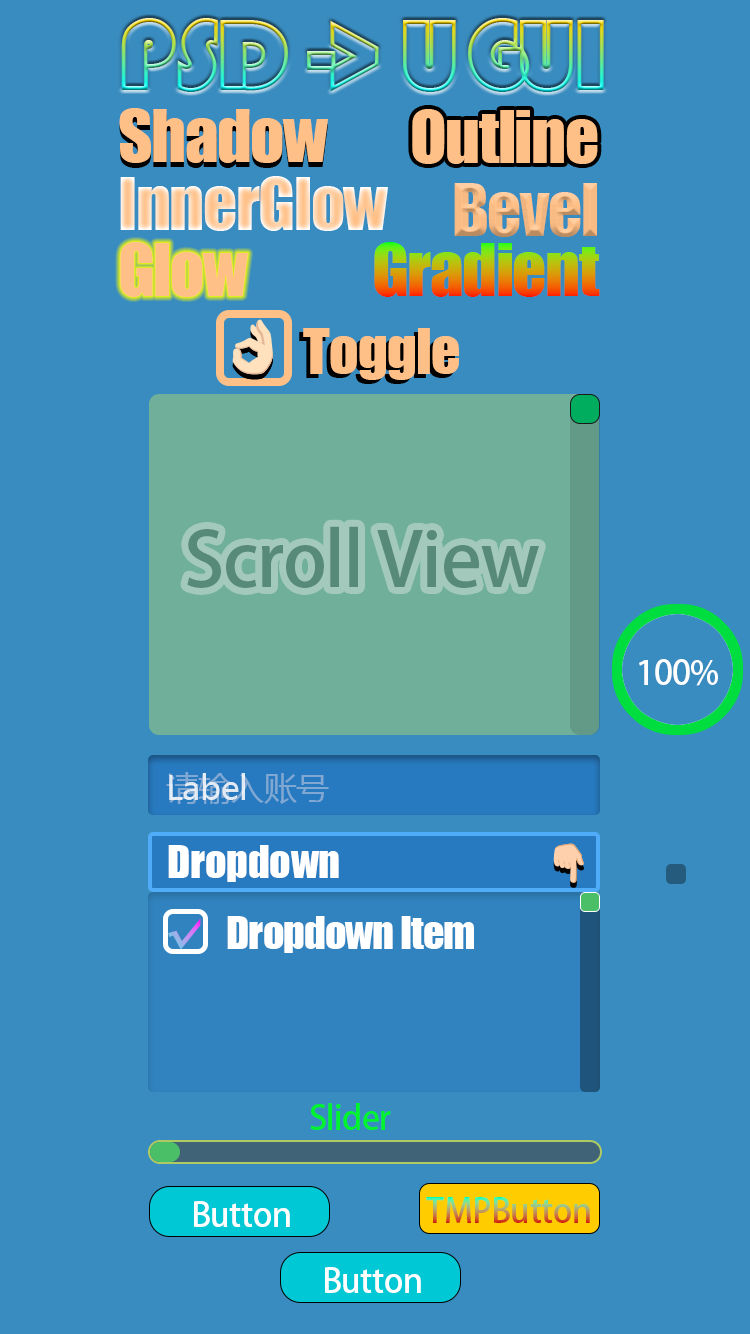
<style>
.page{position:relative;width:750px;height:1334px;background:#398cbf}
.page>*{position:absolute;margin:0}
.t1{font:100px "STCaiyun";letter-spacing:-0.02em}
.t2{font:66.7px "Impact";letter-spacing:-0.02em;color:#ffc087}
.t3{font:66.7px "Impact";letter-spacing:-0.02em}
.t4{font:58.3px "Impact";letter-spacing:-0.02em;color:#ffc087}
.t5{font:75px "AdobeHeitiStd-Regular";letter-spacing:-0.02em;color:#578a79}
.t6{font:33.3px "AdobeHeitiStd-Regular";letter-spacing:-0.02em;color:#ffffff}
.t7{font:33.3px "MicrosoftYaHeiUI";letter-spacing:-0.02em;color:#80a8d3}
.t8{font:33.3px "MicrosoftYaHeiUI";letter-spacing:-0.02em;color:#e3ebf4}
.t9{font:41.7px "Impact";color:#ffffff}
.t10{font:41.7px "Impact";letter-spacing:-0.02em;color:#ffffff}
.t11{font:33.3px "STHupo";letter-spacing:-0.02em}
.t12{font:33.3px "AdobeHeitiStd-Regular";letter-spacing:-0.02em;color:#00f42e}
.t13{font:33.3px "AdobeHeitiStd-Regular";letter-spacing:-0.02em}
</style>
<div class="page">
<p class="t1" style="left:121px;top:18px;width:483px;height:74px">PSD -&gt; UGUI</p>
<p class="t2" style="left:119px;top:108px;width:209px;height:55px">Shadow</p>
<p class="t2" style="left:412px;top:109px;width:186px;height:55px">Outline</p>
<p class="t3" style="left:120px;top:176px;width:268px;height:55px">InnerGlow</p>
<p class="t2" style="left:454px;top:183px;width:143px;height:54px">Bevel</p>
<p class="t2" style="left:120px;top:242px;width:128px;height:55px">Glow</p>
<p class="t3" style="left:374px;top:242px;width:226px;height:55px">Gradient</p>
<p class="t4" style="left:303px;top:328px;width:156px;height:52px">Toggle</p>
<p class="t5" style="left:187px;top:526px;width:352px;height:62px">Scroll View</p>
<p class="t6" style="left:639px;top:659px;width:79px;height:27px">100%</p>
<p class="t7" style="left:166px;top:772px;width:163px;height:32px">请输入账号</p>
<p class="t8" style="left:169px;top:773px;width:76px;height:27px">Label</p>
<p class="t9" style="left:168px;top:845px;width:171px;height:37px">Dropdown</p>
<p class="t10" style="left:227px;top:916px;width:247px;height:37px">Dropdown Item</p>
<p class="t11" style="left:168px;top:919px;width:33px;height:31px">√</p>
<p class="t12" style="left:310px;top:1103px;width:81px;height:27px">Slider</p>
<p class="t6" style="left:194px;top:1201px;width:96px;height:26px">Button</p>
<p class="t13" style="left:426px;top:1197px;width:164px;height:26px">TMPButton</p>
<p class="t6" style="left:325px;top:1267px;width:96px;height:26px">Button</p>
</div>
